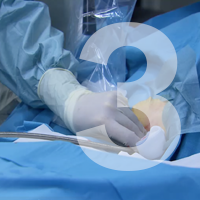
<style>
.page{position:relative;width:200px;height:200px}
.page>*{position:absolute;margin:0}
.t1{font:208.3px "PostGrotesk-Bold"}
</style>
<div class="page">
<p class="t1" style="left:76px;top:22px;width:105px;height:149px">3</p>
</div>
